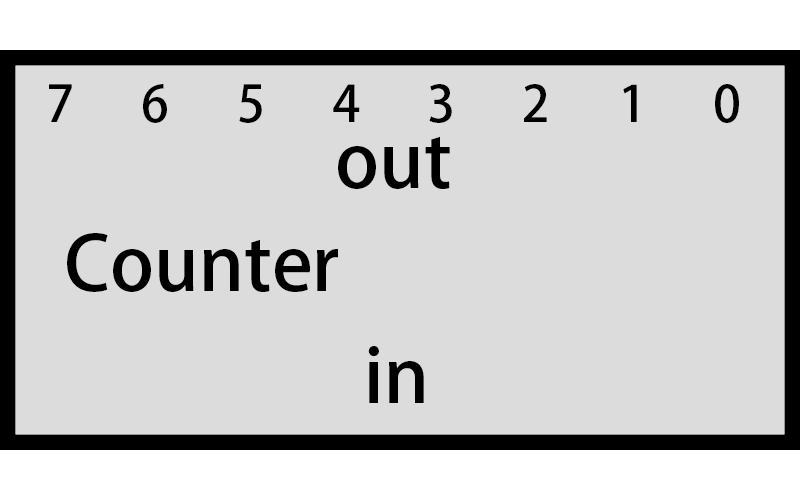
<style>
.page{position:relative;width:800px;height:500px;background:#dcdcdc}
.page>*{position:absolute;margin:0}
.t1{font:50px "AdobeHeitiStd-Regular";color:#000000}
.t2{font:75px "AdobeHeitiStd-Regular";color:#000000}
</style>
<div class="page">
<p class="t1" style="left:49px;top:84px;width:690px;height:39px">7      6      5      4      3      2      1      0</p>
<p class="t2" style="left:338px;top:136px;width:112px;height:53px">out</p>
<p class="t2" style="left:67px;top:233px;width:271px;height:59px">Counter</p>
<p class="t2" style="left:368px;top:346px;width:56px;height:57px">in</p>
</div>
